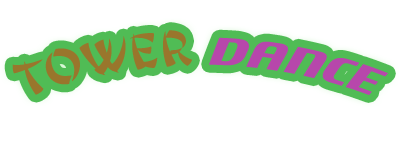
<style>
.page{position:relative;width:400px;height:150px;background:#ffffff}
.page>*{position:absolute;margin:0}
.t1{font:44.4px "JingJing";letter-spacing:-0.01em;color:#99762c}
.t2{font:61.1px "Motorwerk";letter-spacing:-0.01em;color:#b747ab}
</style>
<div class="page">
<p class="t1" style="left:12px;top:30px;width:376px;height:65px">Tower <span class="t2">Dance</span></p>
</div>
